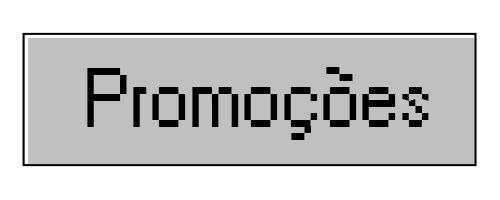
<style>
.page{position:relative;width:500px;height:200px;background:#c0c0c0}
.page>*{position:absolute;margin:0}
.t1{font:82px "Windows";color:#000000}
</style>
<div class="page">
<p class="t1" style="left:87px;top:67px;width:342px;height:73px">Promoções</p>
</div>
